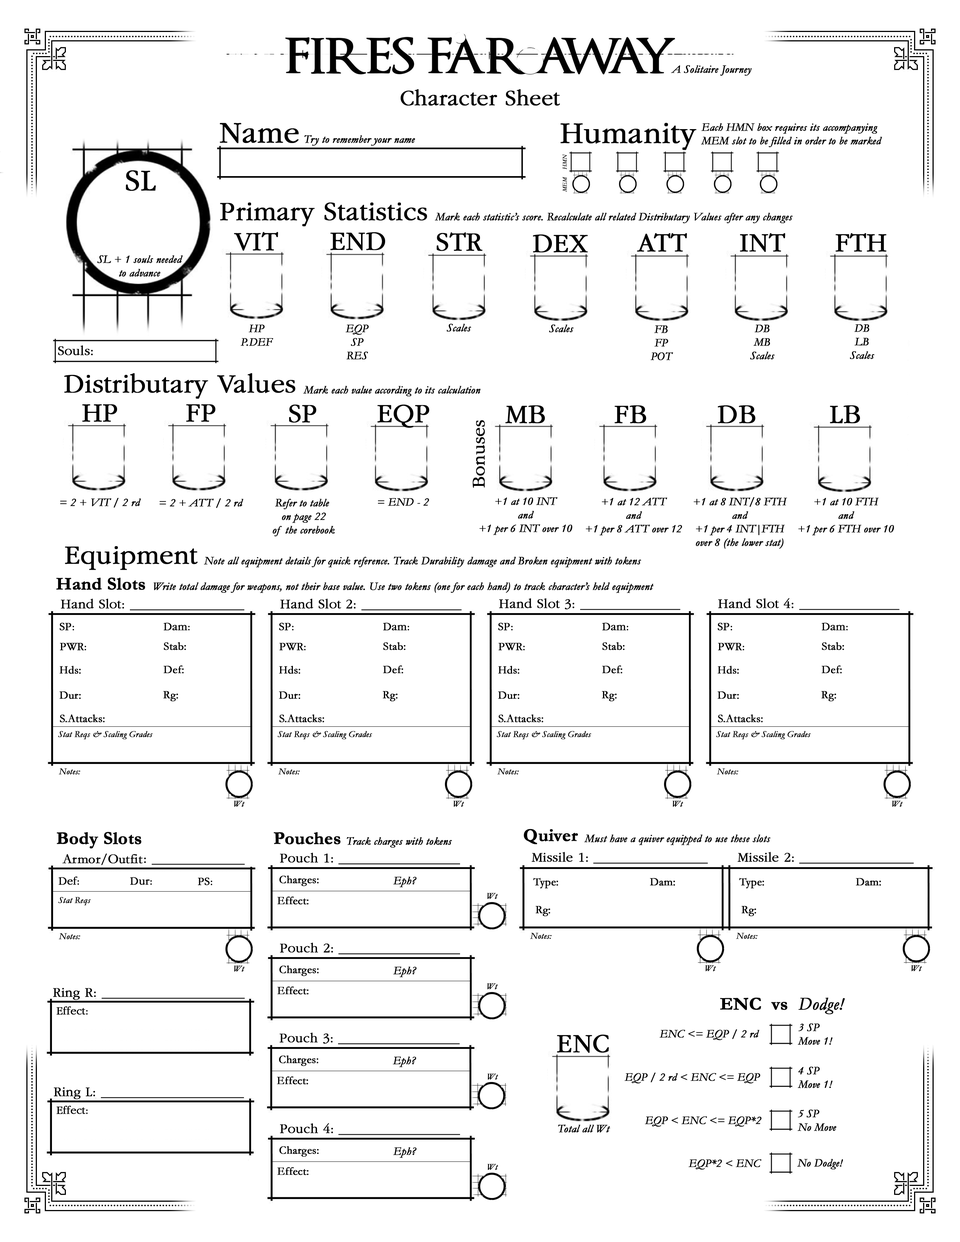
<style>
.page{position:relative;width:960px;height:1242px;background:#ffffff}
.page>*{position:absolute;margin:0}
.t1{font:11.3px "Garamond-Italic";color:#010101;font-weight:bold}
.t2{font:22.6px "Garamond";color:#000000;font-weight:bold}
.t3{font:30.9px "Garamond";color:#000000;font-weight:bold}
.t4{font:11.3px "Garamond-Italic";color:#000000;font-weight:bold}
.t5{font:6px "Garamond-Italic";color:#000000;font-weight:bold}
.t6{font:27.1px "Garamond";color:#000000;font-weight:bold}
.t7{font:13.6px "Garamond";color:#000000;font-weight:bold}
.t8{font:18.1px "Garamond";color:#000000;font-weight:bold}
.t9{font:18.1px "Garamond-Bold";color:#000000;font-weight:bold}
.t10{font:11.3px "Garamond";color:#000000;font-weight:bold}
.t11{font:9px "Garamond-Italic";color:#000000;font-weight:bold}
.t12{font:18.1px "Garamond-Italic";color:#000000;font-weight:bold}
</style>
<div class="page">
<p class="t1" style="left:671px;top:65px;width:81px;height:11px">A Solitaire Journey</p>
<p class="t2" style="left:401px;top:89px;width:159px;height:17px">Character Sheet</p>
<p class="t3" style="left:220px;top:123px;width:79px;height:20px">Name</p>
<p class="t3" style="left:561px;top:123px;width:135px;height:27px">Humanity</p>
<p class="t4" style="left:701px;top:123px;width:181px;height:24px">Each HMN box requires its accompanying<br>MEM slot to be filled in order to be marked</p>
<p class="t4" style="left:304px;top:135px;width:111px;height:11px">Try to remember your name</p>
<p class="t5" style="left:562px;top:154px;width:5px;height:15px;rotate:-90deg">HMN</p>
<p class="t3" style="left:126px;top:170px;width:30px;height:21px">SL</p>
<p class="t5" style="left:562px;top:177px;width:5px;height:15px;rotate:-90deg">MEM</p>
<p class="t6" style="left:220px;top:203px;width:207px;height:24px">Primary Statistics</p>
<p class="t4" style="left:435px;top:213px;width:358px;height:10px">Mark each statistic’s score. Recalculate all related Distributary Values after any changes</p>
<p class="t6" style="left:234px;top:232px;width:44px;height:19px">VIT</p>
<p class="t6" style="left:330px;top:232px;width:55px;height:19px">END</p>
<p class="t6" style="left:437px;top:232px;width:46px;height:19px">STR</p>
<p class="t6" style="left:637px;top:233px;width:50px;height:19px">ATT</p>
<p class="t6" style="left:740px;top:233px;width:45px;height:19px">INT</p>
<p class="t6" style="left:835px;top:233px;width:52px;height:19px">FTH</p>
<p class="t6" style="left:533px;top:235px;width:55px;height:18px">DEX</p>
<p class="t4" style="left:97px;top:255px;width:86px;height:22px;text-align:center">SL + 1 souls needed<br>to advance</p>
<p class="t4" style="left:241px;top:324px;width:32px;height:22px;text-align:center">HP<br>P.DEF</p>
<p class="t4" style="left:346px;top:324px;width:23px;height:35px;text-align:center">EQP<br>SP<br>RES</p>
<p class="t4" style="left:446px;top:324px;width:25px;height:8px">Scales</p>
<p class="t4" style="left:549px;top:324px;width:25px;height:8px">Scales</p>
<p class="t4" style="left:650px;top:325px;width:23px;height:35px;text-align:center">FB<br>FP<br>POT</p>
<p class="t4" style="left:750px;top:324px;width:25px;height:35px;text-align:center">DB<br>MB<br>Scales</p>
<p class="t4" style="left:850px;top:324px;width:24px;height:35px;text-align:center">DB<br>LB<br>Scales</p>
<p class="t7" style="left:58px;top:345px;width:35px;height:10px">Souls:</p>
<p class="t6" style="left:64px;top:373px;width:232px;height:26px">Distributary Values</p>
<p class="t4" style="left:303px;top:386px;width:177px;height:10px">Mark each value according to its calculation</p>
<p class="t6" style="left:82px;top:404px;width:35px;height:18px">HP</p>
<p class="t6" style="left:186px;top:404px;width:29px;height:18px">FP</p>
<p class="t6" style="left:289px;top:405px;width:27px;height:18px">SP</p>
<p class="t6" style="left:377px;top:405px;width:52px;height:23px">EQP</p>
<p class="t6" style="left:505px;top:405px;width:40px;height:18px">MB</p>
<p class="t6" style="left:614px;top:405px;width:32px;height:18px">FB</p>
<p class="t6" style="left:717px;top:405px;width:39px;height:18px">DB</p>
<p class="t6" style="left:830px;top:405px;width:30px;height:18px">LB</p>
<p class="t8" style="left:472px;top:420px;width:13px;height:68px;rotate:-90deg">Bonuses</p>
<p class="t4" style="left:479px;top:497px;width:93px;height:38px;text-align:center">+1 at 10 INT<br>and<br>+1 per 6 INT over 10</p>
<p class="t4" style="left:586px;top:498px;width:96px;height:38px;text-align:center">+1 at 12 ATT<br>and<br>+1 per 8 ATT over 12</p>
<p class="t4" style="left:693px;top:497px;width:94px;height:52px;text-align:center">+1 at 8 INT/8 FTH<br>and<br>+1 per 4 INT|FTH<br>over 8 (the lower stat)</p>
<p class="t4" style="left:798px;top:498px;width:96px;height:38px;text-align:center">+1 at 10 FTH<br>and<br>+1 per 6 FTH over 10</p>
<p class="t4" style="left:60px;top:498px;width:81px;height:10px">= 2 + VIT / 2 rd</p>
<p class="t4" style="left:160px;top:498px;width:83px;height:10px">= 2 + ATT / 2 rd</p>
<p class="t4" style="left:273px;top:499px;width:62px;height:37px;text-align:center">Refer to table <br>on page 22<br>of the corebook</p>
<p class="t4" style="left:378px;top:498px;width:51px;height:8px">= END - 2</p>
<p class="t6" style="left:65px;top:546px;width:133px;height:24px">Equipment</p>
<p class="t4" style="left:204px;top:557px;width:437px;height:11px">Note all equipment details for quick reference. Track Durability damage and Broken equipment with tokens</p>
<p class="t9" style="left:56px;top:577px;width:89px;height:13px">Hand Slots</p>
<p class="t4" style="left:154px;top:582px;width:500px;height:11px">Write total damage for weapons, not their base value. Use two tokens (one for each hand) to track character’s held equipment</p>
<p class="t7" style="left:61px;top:599px;width:183px;height:12px">Hand Slot: ________________</p>
<p class="t7" style="left:280px;top:599px;width:182px;height:12px">Hand Slot 2: ______________</p>
<p class="t7" style="left:499px;top:598px;width:181px;height:12px">Hand Slot 3: ______________</p>
<p class="t7" style="left:718px;top:598px;width:181px;height:12px">Hand Slot 4: ______________</p>
<p class="t9" style="left:57px;top:832px;width:85px;height:17px">Body Slots</p>
<p class="t9" style="left:274px;top:832px;width:67px;height:13px">Pouches</p>
<p class="t9" style="left:524px;top:829px;width:54px;height:15px">Quiver</p>
<p class="t4" style="left:347px;top:837px;width:105px;height:11px">Track charges with tokens</p>
<p class="t4" style="left:584px;top:835px;width:187px;height:10px">Must have a quiver equipped to use these slots</p>
<p class="t7" style="left:144px;top:858px;width:101px;height:7px">: _____________</p>
<p class="t7" style="left:280px;top:853px;width:180px;height:12px">Pouch 1: _________________</p>
<p class="t7" style="left:532px;top:852px;width:176px;height:12px">Missile 1: ________________</p>
<p class="t7" style="left:737px;top:852px;width:177px;height:12px">Missile 2: ________________</p>
<p class="t10" style="left:58px;top:877px;width:21px;height:8px">Def:</p>
<p class="t10" style="left:130px;top:877px;width:22px;height:8px">Dur:</p>
<p class="t10" style="left:198px;top:877px;width:14px;height:8px">PS:</p>
<p class="t11" style="left:487px;top:893px;width:11px;height:6px">Wt</p>
<p class="t11" style="left:58px;top:897px;width:33px;height:9px">Stat Reqs</p>
<p class="t7" style="left:280px;top:943px;width:180px;height:12px">Pouch 2: _________________</p>
<p class="t7" style="left:53px;top:988px;width:192px;height:12px">Ring R: ____________________</p>
<p class="t11" style="left:487px;top:983px;width:11px;height:7px">Wt</p>
<p class="t9" style="left:720px;top:998px;width:125px;height:16px">ENC  vs  <span class="t12">Dodge!</span></p>
<p class="t10" style="left:56px;top:1007px;width:32px;height:8px">Effect:</p>
<p class="t4" style="left:798px;top:1024px;width:34px;height:21px">3 SP<br>Move 1!</p>
<p class="t7" style="left:279px;top:1033px;width:181px;height:12px">Pouch 3: _________________</p>
<p class="t6" style="left:557px;top:1035px;width:52px;height:18px">ENC</p>
<p class="t4" style="left:660px;top:1030px;width:99px;height:10px">ENC &lt;= EQP / 2 rd</p>
<p class="t11" style="left:487px;top:1074px;width:11px;height:6px">Wt</p>
<p class="t4" style="left:625px;top:1073px;width:135px;height:11px">EQP / 2 rd &lt; ENC &lt;= EQP</p>
<p class="t4" style="left:798px;top:1067px;width:34px;height:21px">4 SP<br>Move 1!</p>
<p class="t7" style="left:54px;top:1088px;width:190px;height:12px">Ring L: ____________________</p>
<p class="t10" style="left:56px;top:1106px;width:32px;height:8px">Effect:</p>
<p class="t4" style="left:797px;top:1110px;width:39px;height:21px">5 SP<br>No Move</p>
<p class="t4" style="left:645px;top:1117px;width:117px;height:10px">EQP &lt; ENC &lt;= EQP*2</p>
<p class="t7" style="left:280px;top:1123px;width:180px;height:12px">Pouch 4: _________________</p>
<p class="t4" style="left:558px;top:1125px;width:52px;height:8px">Total all Wt</p>
<p class="t11" style="left:487px;top:1164px;width:11px;height:6px">Wt</p>
<p class="t4" style="left:688px;top:1159px;width:74px;height:11px">EQP*2 &lt; ENC</p>
<p class="t4" style="left:797px;top:1159px;width:46px;height:11px">No Dodge!</p>
</div>
